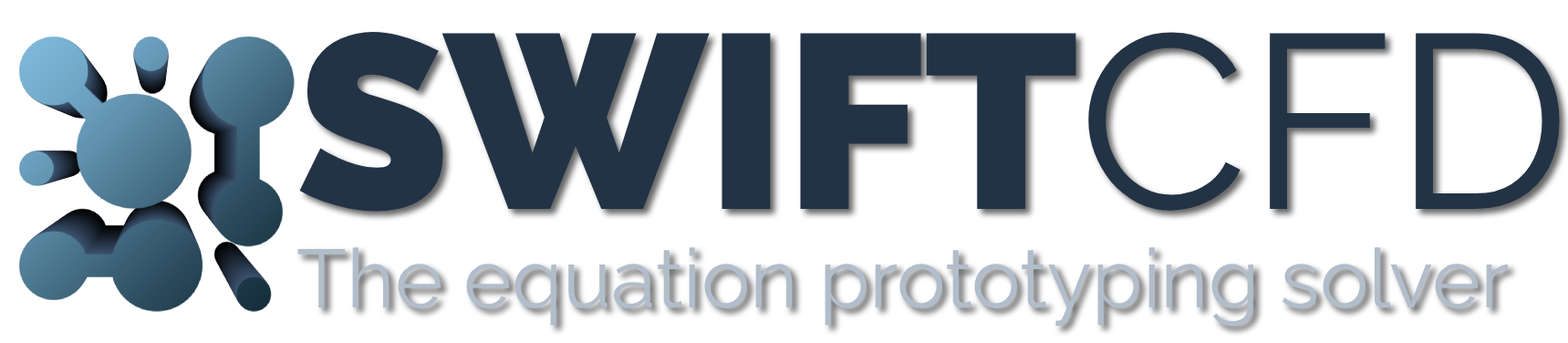
<style>
.page{position:relative;width:1568px;height:343px;background:#ffffff}
.page>*{position:absolute;margin:0}
.t1{font:82.1px "RalewayRoman-Regular";color:#b2bdcb}
.t2{font:247.2px "RalewayRoman-Black";color:#233346}
.t3{font:247.2px "RalewayRoman-Regular";color:#233346}
</style>
<div class="page">
<p class="t1" style="left:297px;top:31px;width:1263px;height:296px"><span class="t2">SWIFT</span><span class="t3">CFD<br></span>The equation prototyping solver</p>
</div>
